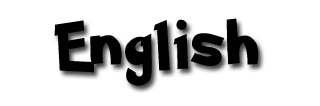
<style>
.page{position:relative;width:320px;height:106px;background:#ffffff}
.page>*{position:absolute;margin:0}
.t1{font:48px "PokemonSolidNormal";letter-spacing:0.14em;color:#000000}
</style>
<div class="page">
<p class="t1" style="left:54px;top:18px;width:205px;height:68px">English</p>
</div>
